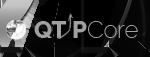
<style>
.page{position:relative;width:150px;height:57px;background:#000000}
.page>*{position:absolute;margin:0}
.t1{font:24px "Raleway-ExtraBold";color:#a1a1a1}
.t2{font:24px "Raleway-ExtraLight";color:#a1a1a1}
</style>
<div class="page">
<p class="t1" style="left:34px;top:21px;width:104px;height:17px">QT P<span class="t2">Core</span></p>
</div>
